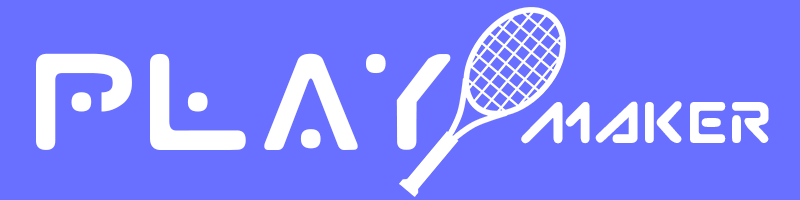
<style>
.page{position:relative;width:800px;height:200px;background:#696fff}
.page>*{position:absolute;margin:0}
.t1{font:120px "PlanetX";letter-spacing:-0.15em;color:#ffffff}
.t2{font:60px "SubatomicTsoonami";color:#ffffff}
</style>
<div class="page">
<p class="t1" style="left:36px;top:53px;width:415px;height:97px">PLAY</p>
<p class="t2" style="left:521px;top:101px;width:248px;height:43px">maker</p>
</div>
